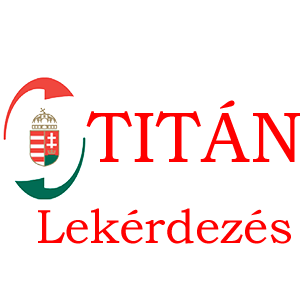
<style>
.page{position:relative;width:300px;height:300px;background:#ffffff}
.page>*{position:absolute;margin:0}
.t1{font:72px "BookmanOldStyle";color:#ff0000}
.t2{font:48px "BookmanOldStyle";color:#ff0000}
</style>
<div class="page">
<p class="t1" style="left:86px;top:100px;width:215px;height:62px">TITÁN</p>
<p class="t2" style="left:38px;top:208px;width:253px;height:36px">Lekérdezés</p>
</div>
